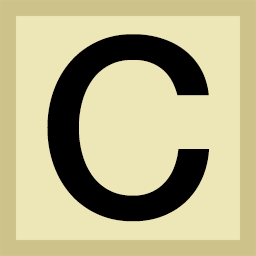
<style>
.page{position:relative;width:256px;height:256px;background:#ede7b8}
.page>*{position:absolute;margin:0}
.t1{font:250px "HelveticaNeue-Medium";color:#000000}
</style>
<div class="page">
<p class="t1" style="left:47px;top:34px;width:162px;height:188px">C</p>
</div>
